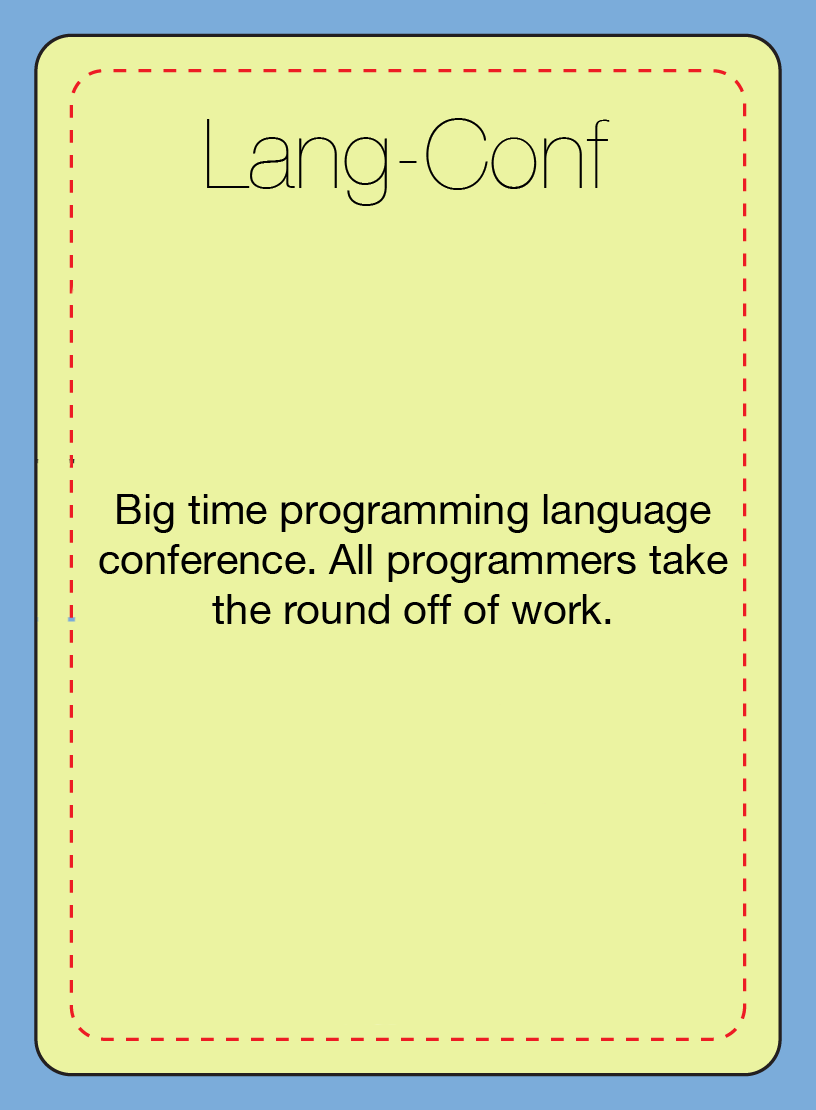
<style>
.page{position:relative;width:816px;height:1110px;background:#ebf3a1}
.page>*{position:absolute;margin:0}
.t1{font:95.8px "HelveticaNeue-UltraLight";color:#000000}
.t2{font:41.7px "HelveticaNeue";color:#000000}
</style>
<div class="page">
<p class="t1" style="left:207px;top:118px;width:403px;height:88px">Lang-Conf</p>
<p class="t2" style="left:99px;top:494px;width:629px;height:130px;text-align:center">Big time programming language<br>conference. All programmers take<br>the round off of work.</p>
</div>
